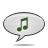
<style>
.page{position:relative;width:48px;height:48px;background:#ffffff}
.page>*{position:absolute;margin:0}
.t1{font:17.4px "STFangsong";letter-spacing:0.02em;color:#395c25}
.t2{font:17.4px "STFangsong";letter-spacing:0.02em}
</style>
<div class="page">
<p class="t1" style="left:17px;top:17px;width:11px;height:15px">♫</p>
<p class="t2" style="left:17px;top:18px;width:11px;height:15px">♫</p>
</div>
